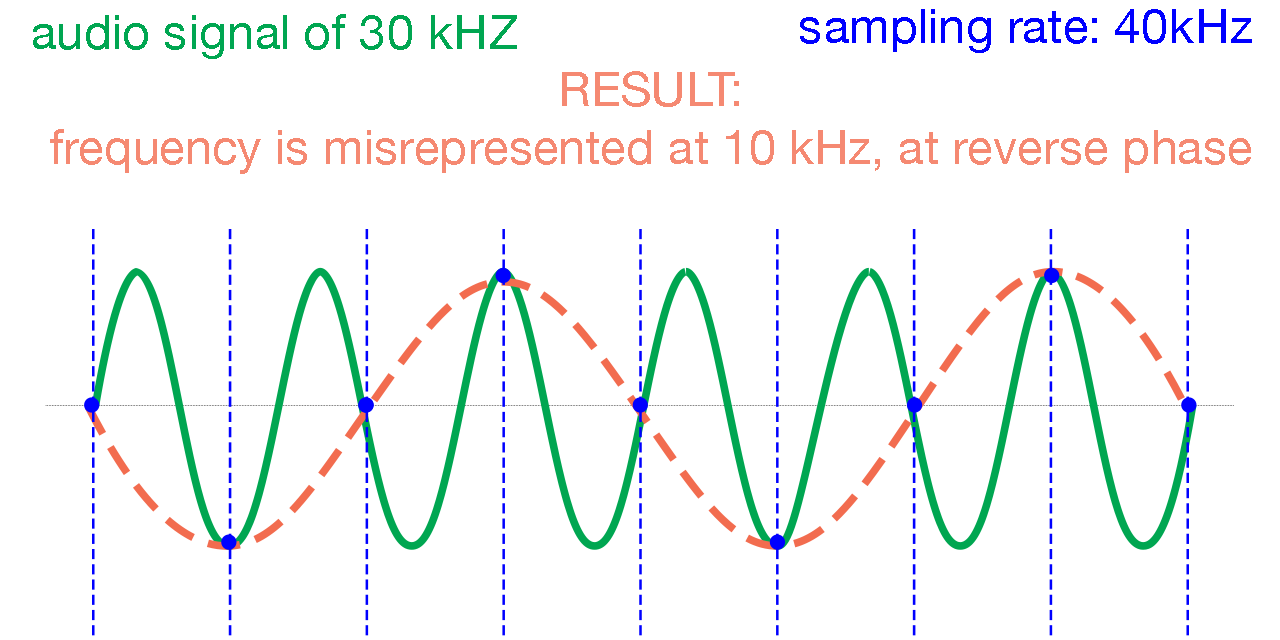
<style>
.page{position:relative;width:1280px;height:640px;background:#ffffff}
.page>*{position:absolute;margin:0}
.t1{font:48px "HelveticaNeue";color:#00a651}
.t2{font:48px "HelveticaNeue";color:#0000ff}
.t3{font:48px "HelveticaNeue";color:#f58a72}
.t4{font:48px/11px "HelveticaNeue";color:#f58a72}
</style>
<div class="page">
<p class="t1" style="left:33px;top:14px;width:484px;height:45px">audio signal of 30 kHZ</p>
<p class="t2" style="left:800px;top:9px;width:452px;height:44px">sampling rate: 40kHz</p>
<p class="t3" style="left:50px;top:71px;width:1201px;height:103px;text-align:center"><span class="t4">RESULT: <br></span>frequency is misrepresented at 10 kHz, at reverse phase</p>
</div>
